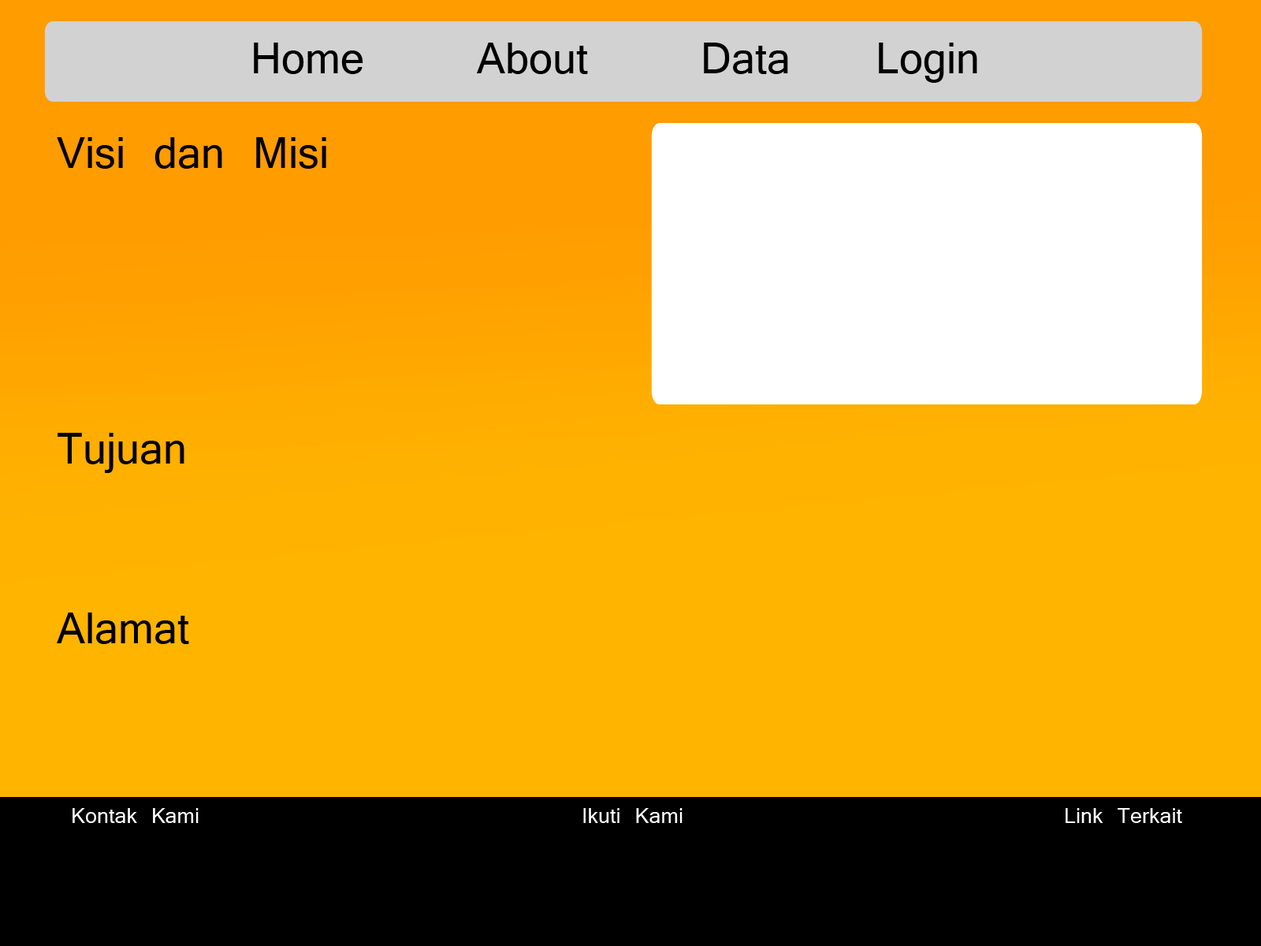
<style>
.page{position:relative;width:1261px;height:946px;background:#ffb400}
.page>*{position:absolute;margin:0}
.t1{font:47.3px "Vrinda";color:#000000}
.t2{font:23.6px "Vrinda";color:#ffffff}
</style>
<div class="page">
<p class="t1" style="left:254px;top:43px;width:723px;height:40px">Home     About    Data   Login</p>
<p class="t1" style="left:57px;top:137px;width:269px;height:32px">Visi dan Misi</p>
<p class="t1" style="left:58px;top:433px;width:126px;height:40px">Tujuan</p>
<p class="t1" style="left:57px;top:612px;width:132px;height:32px">Alamat</p>
<p class="t2" style="left:73px;top:808px;width:1109px;height:15px">Kontak Kami              Ikuti Kami              Link Terkait</p>
</div>
